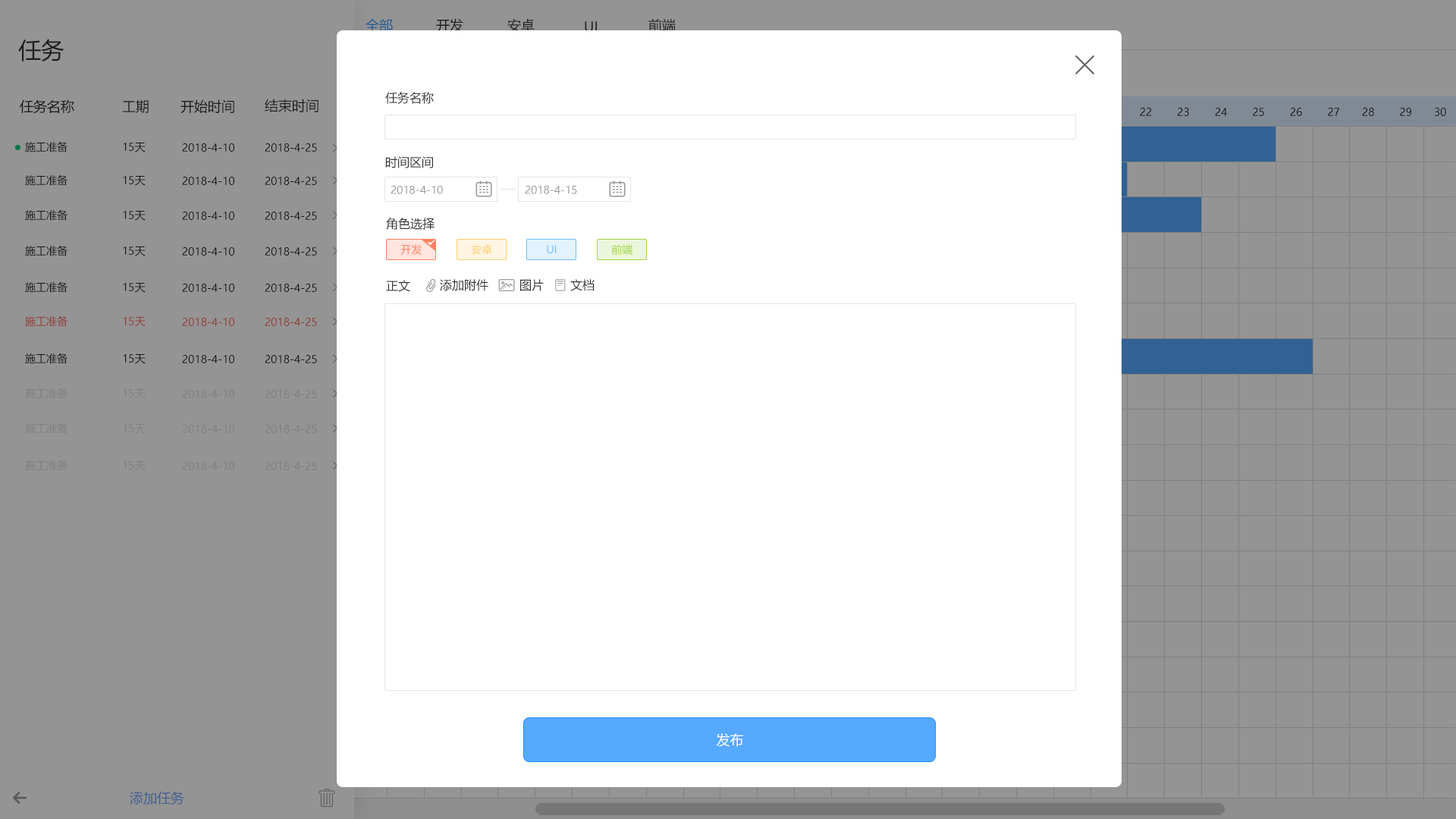
<style>
.page{position:relative;width:1456px;height:819px;background:#ffffff}
.page>*{position:absolute;margin:0}
.t1{font:13.6px "MicrosoftYaHei";color:#215a93}
.t2{font:13.6px "MicrosoftYaHei";color:#333333}
.t3{font:22.7px "MicrosoftYaHei";color:#333333}
.t4{font:13.6px "MicrosoftYaHei";color:#282828}
.t5{font:12.1px "MicrosoftYaHei";color:#333333}
.t6{font:10.6px "MicrosoftYaHei";color:#282828}
.t7{font:10.6px "MicrosoftYaHei";color:#999999}
.t8{font:10.6px "MicrosoftYaHei";color:#ff815f}
.t9{font:10.6px "MicrosoftYaHei";color:#ffce6f}
.t10{font:10.6px "MicrosoftYaHei";color:#6fbfff}
.t11{font:10.6px "MicrosoftYaHei";color:#a1d246}
.t12{font:10.6px "MicrosoftYaHei";color:#933e38}
.t13{font:10.6px "MicrosoftYaHei";color:#808080}
.t14{font:13.6px "MicrosoftYaHei";color:#ffffff}
.t15{font:13.6px "MicrosoftYaHei";color:#446292}
</style>
<div class="page">
<p class="t1" style="left:366px;top:18px;width:27px;height:14px">全部</p>
<p class="t2" style="left:436px;top:18px;width:27px;height:15px">开发</p>
<p class="t2" style="left:507px;top:18px;width:28px;height:14px">安卓</p>
<p class="t2" style="left:585px;top:21px;width:12px;height:11px">UI</p>
<p class="t2" style="left:648px;top:18px;width:28px;height:14px">前端</p>
<p class="t3" style="left:18px;top:39px;width:46px;height:22px">任务</p>
<p class="t4" style="left:20px;top:99px;width:54px;height:15px">任务名称</p>
<p class="t4" style="left:122px;top:100px;width:27px;height:14px">工期</p>
<p class="t2" style="left:180px;top:99px;width:54px;height:15px">开始时间</p>
<p class="t2" style="left:265px;top:99px;width:53px;height:13px">结束时间</p>
<p class="t5" style="left:385px;top:92px;width:49px;height:12px">任务名称</p>
<p class="t6" style="left:25px;top:141px;width:42px;height:11px">施工准备</p>
<p class="t6" style="left:123px;top:143px;width:23px;height:9px">15天</p>
<p class="t6" style="left:182px;top:143px;width:52px;height:9px">2018-4-10</p>
<p class="t6" style="left:265px;top:143px;width:52px;height:9px">2018-4-25</p>
<p class="t5" style="left:385px;top:156px;width:48px;height:12px">时间区间</p>
<p class="t6" style="left:25px;top:174px;width:42px;height:12px">施工准备</p>
<p class="t6" style="left:123px;top:176px;width:23px;height:10px">15天</p>
<p class="t6" style="left:182px;top:177px;width:52px;height:8px">2018-4-10</p>
<p class="t6" style="left:265px;top:177px;width:52px;height:8px">2018-4-25</p>
<p class="t7" style="left:391px;top:185px;width:52px;height:9px">2018-4-10</p>
<p class="t7" style="left:525px;top:185px;width:52px;height:9px">2018-4-15</p>
<p class="t6" style="left:25px;top:209px;width:42px;height:12px">施工准备</p>
<p class="t6" style="left:123px;top:211px;width:23px;height:10px">15天</p>
<p class="t6" style="left:182px;top:212px;width:52px;height:8px">2018-4-10</p>
<p class="t6" style="left:265px;top:212px;width:52px;height:8px">2018-4-25</p>
<p class="t5" style="left:386px;top:218px;width:49px;height:12px">角色选择</p>
<p class="t6" style="left:25px;top:245px;width:42px;height:11px">施工准备</p>
<p class="t8" style="left:400px;top:244px;width:22px;height:11px">开发</p>
<p class="t9" style="left:471px;top:244px;width:21px;height:11px">安卓</p>
<p class="t10" style="left:547px;top:245px;width:10px;height:9px">UI</p>
<p class="t11" style="left:611px;top:244px;width:22px;height:11px">前端</p>
<p class="t6" style="left:123px;top:246px;width:23px;height:10px">15天</p>
<p class="t6" style="left:182px;top:247px;width:52px;height:9px">2018-4-10</p>
<p class="t6" style="left:265px;top:247px;width:52px;height:9px">2018-4-25</p>
<p class="t6" style="left:25px;top:281px;width:42px;height:12px">施工准备</p>
<p class="t5" style="left:386px;top:280px;width:24px;height:12px">正文</p>
<p class="t5" style="left:440px;top:279px;width:48px;height:12px">添加附件</p>
<p class="t5" style="left:520px;top:279px;width:24px;height:12px">图片</p>
<p class="t5" style="left:570px;top:279px;width:25px;height:12px">文档</p>
<p class="t6" style="left:123px;top:283px;width:23px;height:10px">15天</p>
<p class="t6" style="left:182px;top:284px;width:52px;height:8px">2018-4-10</p>
<p class="t6" style="left:265px;top:284px;width:52px;height:8px">2018-4-25</p>
<p class="t12" style="left:25px;top:315px;width:42px;height:12px">施工准备</p>
<p class="t12" style="left:123px;top:317px;width:23px;height:10px">15天</p>
<p class="t12" style="left:182px;top:318px;width:52px;height:8px">2018-4-10</p>
<p class="t12" style="left:265px;top:318px;width:52px;height:8px">2018-4-25</p>
<p class="t6" style="left:25px;top:353px;width:42px;height:11px">施工准备</p>
<p class="t6" style="left:123px;top:354px;width:23px;height:10px">15天</p>
<p class="t6" style="left:182px;top:355px;width:52px;height:8px">2018-4-10</p>
<p class="t6" style="left:265px;top:355px;width:52px;height:8px">2018-4-25</p>
<p class="t13" style="left:25px;top:388px;width:42px;height:11px">施工准备</p>
<p class="t13" style="left:123px;top:389px;width:23px;height:10px">15天</p>
<p class="t13" style="left:182px;top:390px;width:52px;height:8px">2018-4-10</p>
<p class="t13" style="left:265px;top:390px;width:52px;height:8px">2018-4-25</p>
<p class="t13" style="left:25px;top:422px;width:42px;height:12px">施工准备</p>
<p class="t13" style="left:123px;top:424px;width:23px;height:10px">15天</p>
<p class="t13" style="left:182px;top:425px;width:52px;height:8px">2018-4-10</p>
<p class="t13" style="left:265px;top:425px;width:52px;height:8px">2018-4-25</p>
<p class="t13" style="left:25px;top:460px;width:42px;height:11px">施工准备</p>
<p class="t13" style="left:123px;top:461px;width:23px;height:10px">15天</p>
<p class="t13" style="left:182px;top:462px;width:52px;height:8px">2018-4-10</p>
<p class="t13" style="left:265px;top:462px;width:52px;height:8px">2018-4-25</p>
<p class="t14" style="left:716px;top:733px;width:27px;height:14px">发布</p>
<p class="t15" style="left:130px;top:791px;width:54px;height:14px">添加任务</p>
</div>
